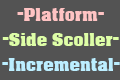
<style>
.page{position:relative;width:120px;height:80px;background:#535353}
.page>*{position:absolute;margin:0}
.t1{font:17.6px "AcmeFont";color:#fec3c3}
.t2{font:17.6px "AcmeFont";color:#defea7}
.t3{font:17.6px "AcmeFont";color:#bceeff}
</style>
<div class="page">
<p class="t1" style="left:17px;top:8px;width:87px;height:13px">-Platform-</p>
<p class="t2" style="left:2px;top:33px;width:117px;height:13px">-Side Scoller-</p>
<p class="t3" style="left:2px;top:58px;width:118px;height:13px">-Incremental-</p>
</div>
